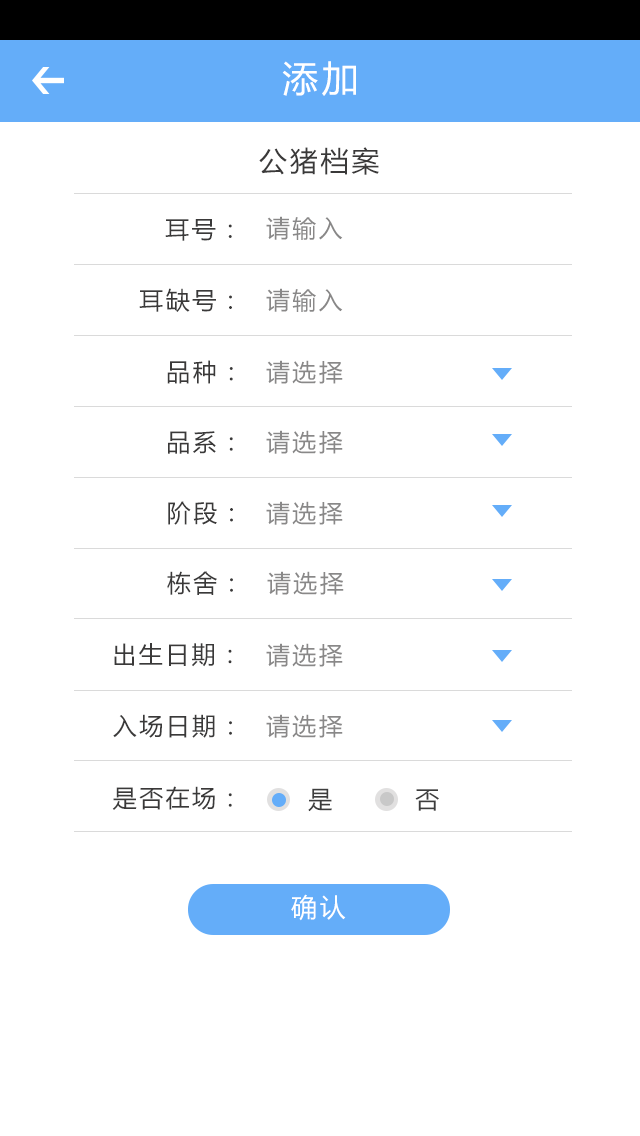
<style>
.page{position:relative;width:640px;height:1136px;background:#ffffff}
.page>*{position:absolute;margin:0}
.t1{font:36px "MicrosoftYaHei";letter-spacing:0.1em;color:#ffffff}
.t2{font:28px "MicrosoftYaHei";letter-spacing:0.1em;color:#3a3939}
.t3{font:24px "MicrosoftYaHei";letter-spacing:0.1em;color:#3a3939}
.t4{font:24px "MicrosoftYaHei";letter-spacing:0.1em;color:#898888}
.t5{font:24px "MicrosoftYaHei";letter-spacing:0.1em;color:#3d3d3d}
.t6{font:26px "MicrosoftYaHei";letter-spacing:0.1em;color:#ffffff}
</style>
<div class="page">
<p class="t1" style="left:282px;top:61px;width:74px;height:35px">添加</p>
<p class="t2" style="left:259px;top:147px;width:120px;height:28px">公猪档案</p>
<p class="t3" style="left:165px;top:219px;width:67px;height:22px">耳号：</p>
<p class="t4" style="left:266px;top:216px;width:77px;height:24px">请输入</p>
<p class="t3" style="left:139px;top:288px;width:93px;height:24px">耳缺号：</p>
<p class="t4" style="left:266px;top:288px;width:77px;height:24px">请输入</p>
<p class="t3" style="left:167px;top:360px;width:66px;height:24px">品种：</p>
<p class="t4" style="left:266px;top:360px;width:77px;height:24px">请选择</p>
<p class="t3" style="left:168px;top:431px;width:65px;height:23px">品系：</p>
<p class="t4" style="left:266px;top:430px;width:77px;height:24px">请选择</p>
<p class="t3" style="left:168px;top:501px;width:65px;height:24px">阶段：</p>
<p class="t4" style="left:266px;top:501px;width:77px;height:24px">请选择</p>
<p class="t3" style="left:167px;top:571px;width:66px;height:24px">栋舍：</p>
<p class="t4" style="left:267px;top:571px;width:77px;height:24px">请选择</p>
<p class="t3" style="left:114px;top:643px;width:118px;height:24px">出生日期：</p>
<p class="t4" style="left:266px;top:643px;width:77px;height:24px">请选择</p>
<p class="t3" style="left:113px;top:714px;width:119px;height:24px">入场日期：</p>
<p class="t4" style="left:266px;top:714px;width:77px;height:24px">请选择</p>
<p class="t3" style="left:112px;top:786px;width:120px;height:24px">是否在场：</p>
<p class="t5" style="left:308px;top:788px;width:24px;height:24px">是</p>
<p class="t5" style="left:415px;top:789px;width:24px;height:22px">否</p>
<p class="t6" style="left:291px;top:894px;width:55px;height:27px">确认</p>
</div>
